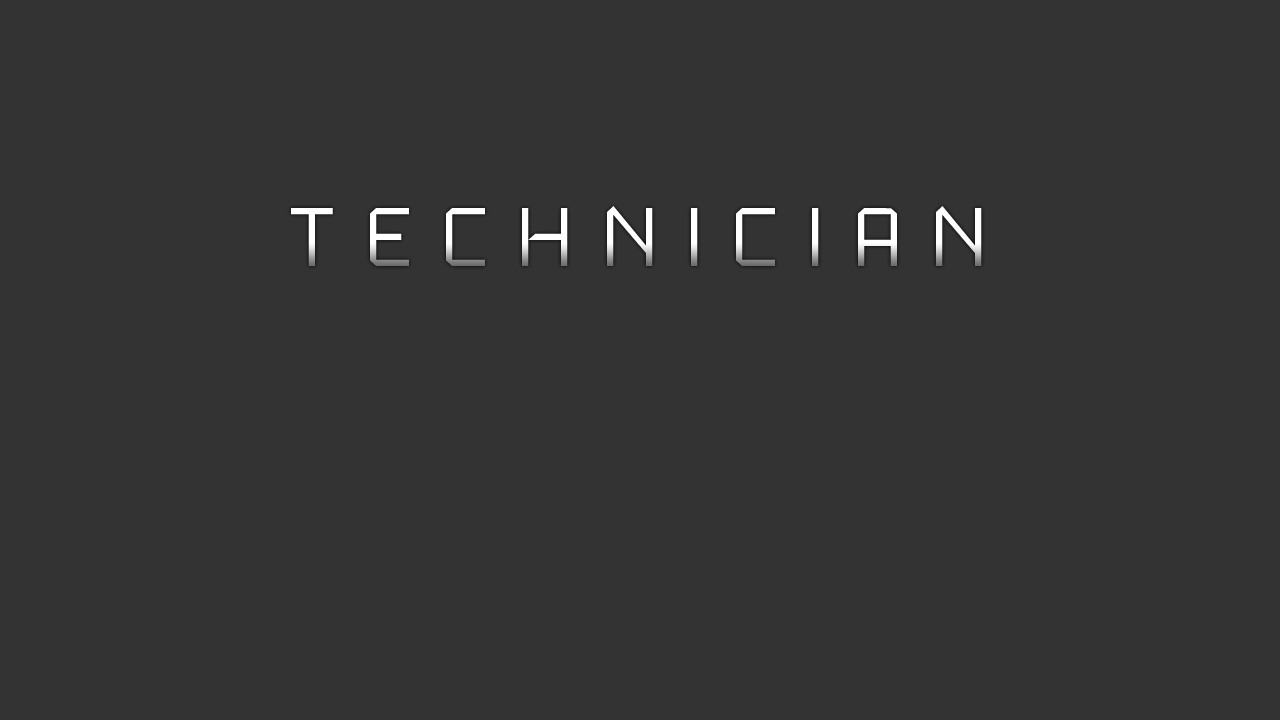
<style>
.page{position:relative;width:1280px;height:720px;background:#333333}
.page>*{position:absolute;margin:0}
.t1{font:83.3px "LuluMonospace-Regular";color:#ffffff}
</style>
<div class="page">
<p class="t1" style="left:291px;top:206px;width:691px;height:60px">T E C H N I C I A N</p>
</div>
